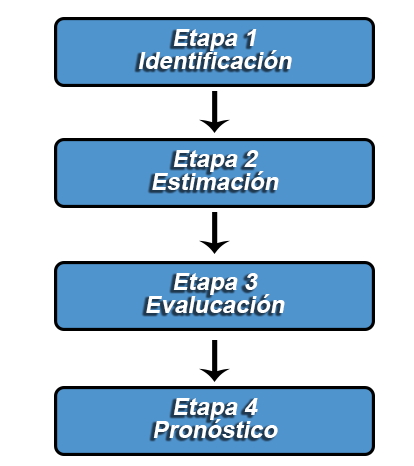
<style>
.page{position:relative;width:414px;height:466px;background:#ffffff}
.page>*{position:absolute;margin:0}
.t1{font:24px/22.9px "Arial-BoldMT";color:#ffffff;font-style:italic}
</style>
<div class="page">
<p class="t1" style="left:138px;top:29px;width:154px;height:40px;text-align:center">Etapa 1<br>Identificación</p>
<p class="t1" style="left:152px;top:150px;width:127px;height:40px;text-align:center">Etapa 2<br>Estimación</p>
<p class="t1" style="left:146px;top:273px;width:139px;height:40px;text-align:center">Etapa 3<br>Evalucación</p>
<p class="t1" style="left:153px;top:398px;width:125px;height:40px;text-align:center">Etapa 4<br>Pronóstico</p>
</div>
